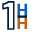
<style>
.page{position:relative;width:32px;height:32px;background:#ffffff}
.page>*{position:absolute;margin:0}
.t1{font:36.7px "Epilogue-Bold"}
.t2{font:16.7px "Epilogue-Bold";color:#045fd2}
.t3{font:16.7px "Epilogue-Bold";color:#c36010}
</style>
<div class="page">
<p class="t1" style="left:2px;top:1px;width:13px;height:29px">1</p>
<p class="t2" style="left:17px;top:3px;width:10px;height:13px">H</p>
<p class="t3" style="left:17px;top:16px;width:10px;height:13px">H</p>
</div>
